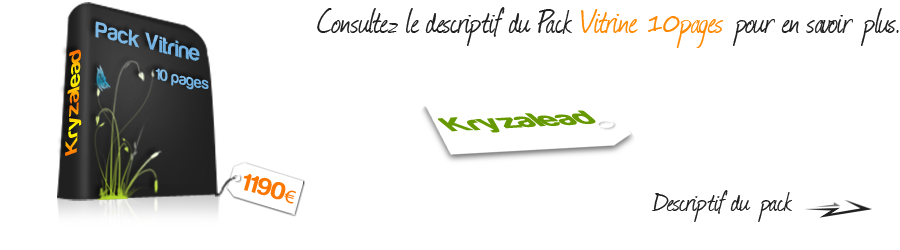
<style>
.page{position:relative;width:900px;height:250px;background:#ffffff}
.page>*{position:absolute;margin:0}
.t1{font:40px "Journal";color:#202021;scale:0.9 1}
.t2{font:42px "Journal";color:#fe8a02;scale:0.9 1}
.t3{font:25px "SegoePrint";color:#fe8a02;scale:0.9 1}
.t4{font:23.6px "Harabara";color:#7cb8e4}
.t5{font:18.8px "Harabara";scale:1.4 1}
.t6{font:16.4px "Harabara";color:#7bb7e4;scale:0.97 1}
.t7{font:29.4px "Harabara";color:#669900;font-weight:bold;scale:1.19 1}
.t8{font:25px "Harabara";color:#fb7702;scale:1.1 1}
.t9{font:19px "MyriadPro-Regular";color:#fb7702;scale:1.1 1}
.t10{font:32px "Journal";color:#202021}
</style>
<div class="page">
<p class="t1" style="left:317px;top:7px;width:582px;height:41px">Consultez le descriptif du Pack <span class="t2">Vitrine </span><span class="t3">10</span><span class="t2">pages</span> pour en savoir plus.</p>
<p class="t4" style="left:95px;top:21px;width:105px;height:40px;rotate:14deg">Pack Vitrine</p>
<p class="t5" style="left:65px;top:49px;width:17px;height:107px;rotate:-88deg">Kryzalead</p>
<p class="t6" style="left:155px;top:68px;width:54px;height:22px;rotate:11deg">10 pages</p>
<p class="t7" style="left:437px;top:110px;width:159px;height:23px;rotate:-3deg">Kryzalead</p>
<p class="t8" style="left:243px;top:174px;width:53px;height:30px;rotate:16deg">1190<span class="t9">€</span></p>
<p class="t10" style="left:651px;top:190px;width:141px;height:32px">Descriptif du pack</p>
</div>
